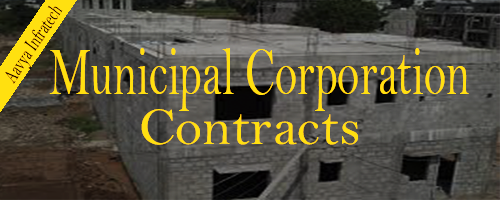
<style>
.page{position:relative;width:500px;height:200px}
.page>*{position:absolute;margin:0}
.t1{font:20.9px "BellMT";color:#000000;scale:0.65 1}
.t2{font:69.2px "BellMT";color:#ffe010;scale:0.65 1}
.t3{font:53.6px "BellMT";color:#ffe010}
</style>
<div class="page">
<p class="t1" style="left:5px;top:5px;width:58px;height:79px;rotate:-56deg">Aavya Infratech</p>
<p class="t2" style="left:49px;top:48px;width:420px;height:63px">Municipal Corporation</p>
<p class="t3" style="left:141px;top:109px;width:217px;height:36px">Contracts</p>
</div>
